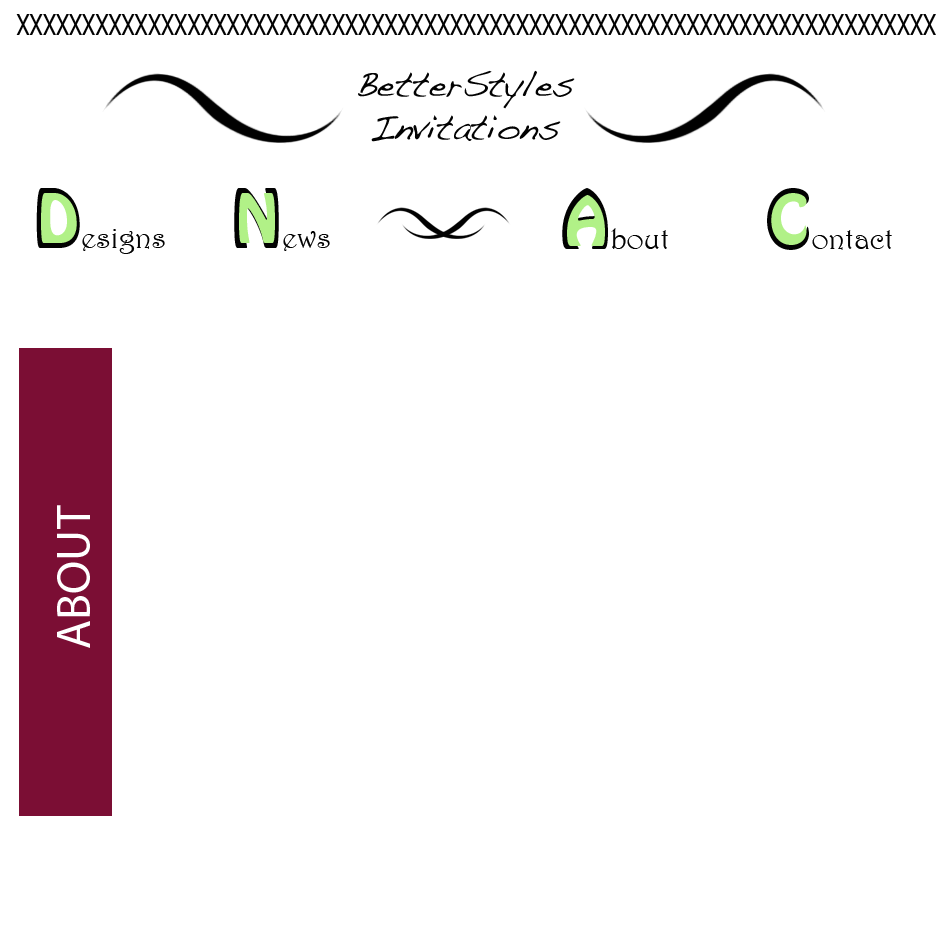
<style>
.page{position:relative;width:950px;height:950px;background:#ffffff}
.page>*{position:absolute;margin:0}
.t1{font:30px "Rockwell";color:#020202}
.t2{font:36px "Handwriting-Dakota";color:#020202}
.t3{font:30px "Harrington"}
.t4{font:72px "HoboStd"}
.t5{font:60px "HoboStd";color:#b1f187}
.t6{font:48px "MyriadPro-Regular";color:#ffffff}
</style>
<div class="page">
<p class="t1" style="left:16px;top:14px;width:920px;height:21px">//////////////////////////////////////////////////////////////////////</p>
<p class="t1" style="left:16px;top:14px;width:920px;height:21px">\\\\\\\\\\\\\\\\\\\\\\\\\\\\\\\\\\\\\\\\\\\\\\\\\\\\\\\\\\\\\\\\\\\\\\</p>
<p class="t2" style="left:358px;top:70px;width:217px;height:72px;text-align:center">BetterStyles<br>Invitations</p>
<p class="t3" style="left:36px;top:188px;width:129px;height:66px"><span class="t4">D</span>esigns</p>
<p class="t5" style="left:41px;top:193px;width:36px;height:50px">D</p>
<p class="t3" style="left:234px;top:188px;width:96px;height:63px"><span class="t4">N</span>ews</p>
<p class="t5" style="left:239px;top:193px;width:36px;height:50px">N</p>
<p class="t3" style="left:562px;top:188px;width:106px;height:61px"><span class="t4">A</span>bout</p>
<p class="t5" style="left:567px;top:195px;width:38px;height:51px">A</p>
<p class="t3" style="left:767px;top:188px;width:125px;height:62px"><span class="t4">C</span>ontact</p>
<p class="t5" style="left:771px;top:193px;width:36px;height:52px">C</p>
<p class="t6" style="left:57px;top:505px;width:33px;height:143px;rotate:-90deg">ABOUT</p>
</div>
